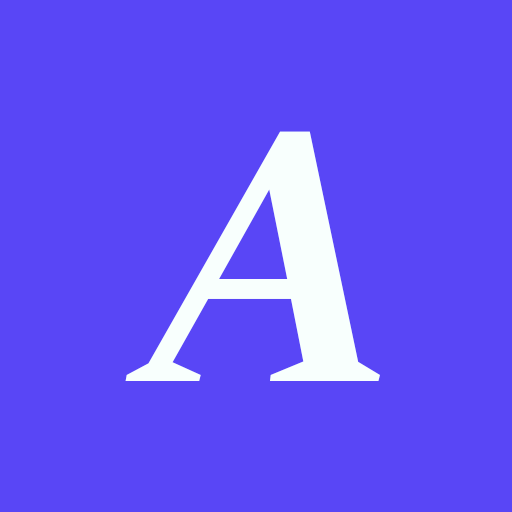
<style>
.page{position:relative;width:512px;height:512px;background:#5946f6}
.page>*{position:absolute;margin:0}
.t1{font:375px "Spectral-BoldItalic";color:#f8fffd}
</style>
<div class="page">
<p class="t1" style="left:125px;top:131px;width:255px;height:250px">A</p>
</div>
